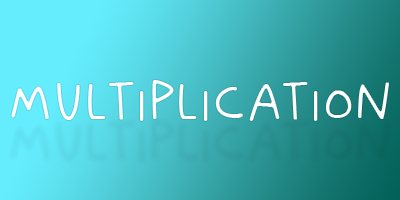
<style>
.page{position:relative;width:400px;height:200px}
.page>*{position:absolute;margin:0}
.t1{font:60px "Childhood"}
</style>
<div class="page">
<p class="t1" style="left:10px;top:79px;width:380px;height:43px">multiplication</p>
</div>
